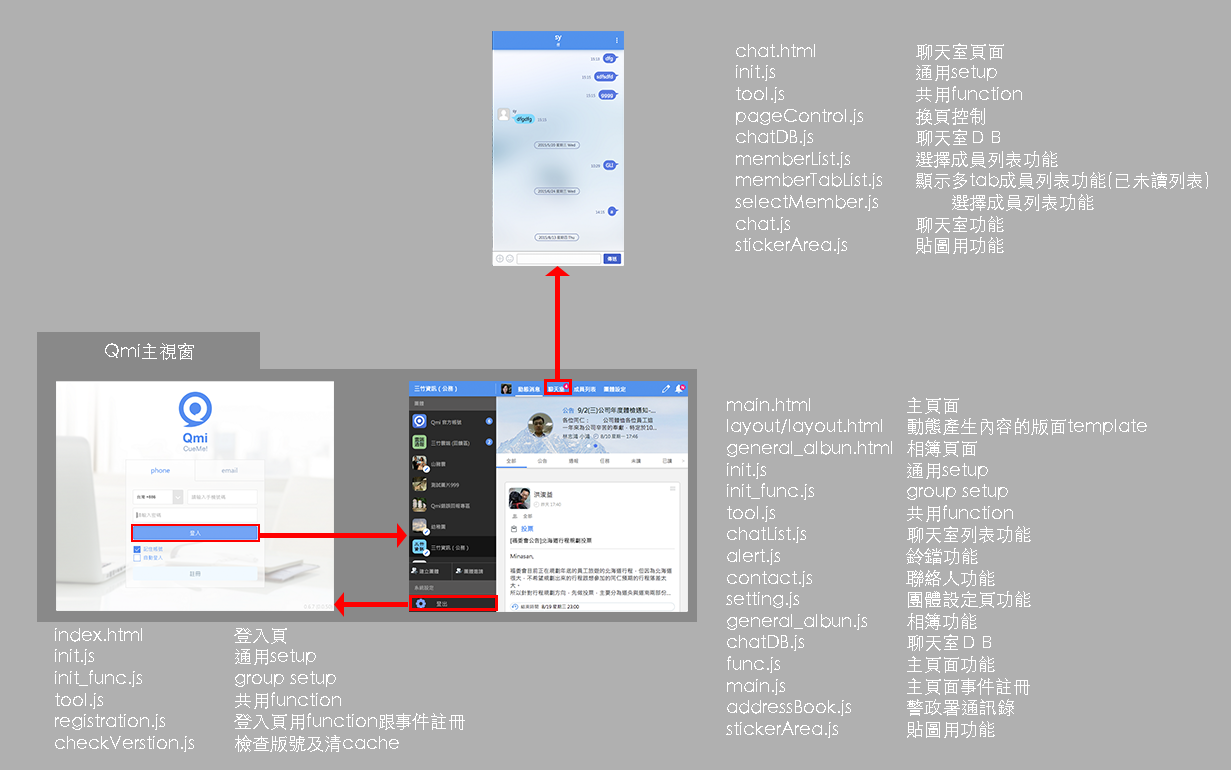
<style>
.page{position:relative;width:1231px;height:770px;background:#b0b0b0}
.page>*{position:absolute;margin:0}
.t1{font:18px "STHeitiTC-Light";color:#ffffff}
</style>
<div class="page">
<p class="t1" style="left:735px;top:43px;width:473px;height:211px">chat.html   聊天室頁面<br>init.js    通用setup<br>tool.js    共用function<br>pageControl.js  換頁控制<br>chatDB.js   聊天室ＤＢ<br>memberList.js  選擇成員列表功能<br>memberTabList.js 顯示多tab成員列表功能(已未讀列表)<br>selectMember.js  選擇成員列表功能<br>chat.js    聊天室功能<br>stickerArea.js  貼圖用功能</p>
<p class="t1" style="left:105px;top:343px;width:89px;height:17px">Qmi主視窗</p>
<p class="t1" style="left:726px;top:397px;width:421px;height:341px">main.html   主頁面<br>layout/layout.html 動態產生內容的版面template<br>general_albun.html 相簿頁面<br>init.js    通用setup<br>init_func.js   group setup<br>tool.js    共用function<br>chatList.js   聊天室列表功能<br>alert.js    鈴鐺功能<br>contact.js   聯絡人功能<br>setting.js   團體設定頁功能<br>general_albun.js  相簿功能<br>chatDB.js   聊天室ＤＢ<br>func.js    主頁面功能<br>main.js    主頁面事件註冊<br>addressBook.js  警政署通訊錄<br>stickerArea.js  貼圖用功能</p>
<p class="t1" style="left:55px;top:628px;width:410px;height:124px">index.html   登入頁<br>init.js    通用setup<br>init_func.js   group setup<br>tool.js    共用function<br>registration.js  登入頁用function跟事件註冊<br>checkVerstion.js  檢查版號及清cache</p>
</div>
